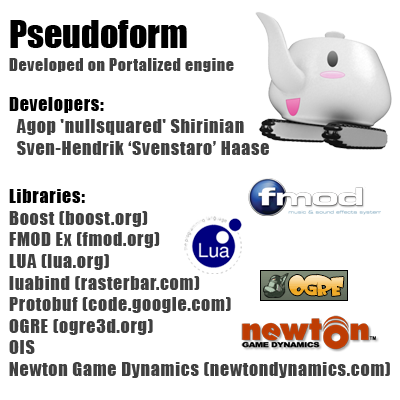
<style>
.page{position:relative;width:400px;height:400px;background:#ffffff}
.page>*{position:absolute;margin:0}
.t1{font:36px "Impact";color:#000000}
.t2{font:18px "Impact";letter-spacing:0.04em;color:#404040}
.t3{font:16px "Impact";letter-spacing:0.04em;color:#404040}
.t4{font:18px "Impact";letter-spacing:0.04em;color:#000000}
.t5{font:18px "Impact";letter-spacing:0.04em;color:#010101}
</style>
<div class="page">
<p class="t1" style="left:10px;top:20px;width:177px;height:28px">Pseudoform</p>
<p class="t2" style="left:9px;top:58px;width:260px;height:97px"><span class="t3">Developed on Portalized engine<br><br></span><span class="t4">Developers: <br></span>  Agop 'nullsquared' Shirinian<br>  Sven-Hendrik ‘Svenstaro’ Haase</p>
<p class="t2" style="left:9px;top:189px;width:381px;height:189px"><span class="t5">Libraries:<br></span>Boost (boost.org) <br>FMOD Ex (fmod.org)<br>LUA (lua.org)<br>luabind (rasterbar.com)<br>Protobuf (code.google.com)<br>OGRE (ogre3d.org)<br>OIS<br>Newton Game Dynamics (newtondynamics.com)</p>
</div>
